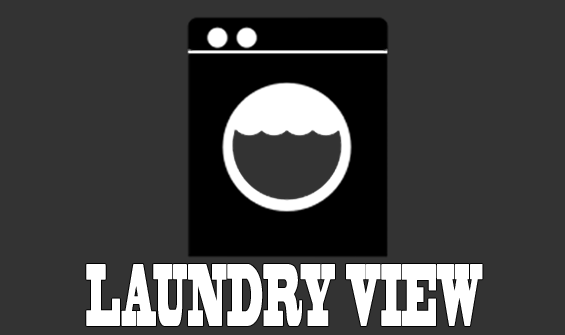
<style>
.page{position:relative;width:565px;height:335px;background:#333333}
.page>*{position:absolute;margin:0}
.t1{font:83.3px "BlackoakStd";color:#ffffff;scale:0.24 1}
</style>
<div class="page">
<p class="t1" style="left:86px;top:264px;width:397px;height:62px">LAUNDRY VIEW</p>
</div>
